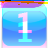
<style>
.page{position:relative;width:48px;height:48px}
.page>*{position:absolute;margin:0}
.t1{font:30px "SegoeUI-Bold"}
</style>
<div class="page">
<p class="t1" style="left:18px;top:11px;width:14px;height:21px">1</p>
</div>
